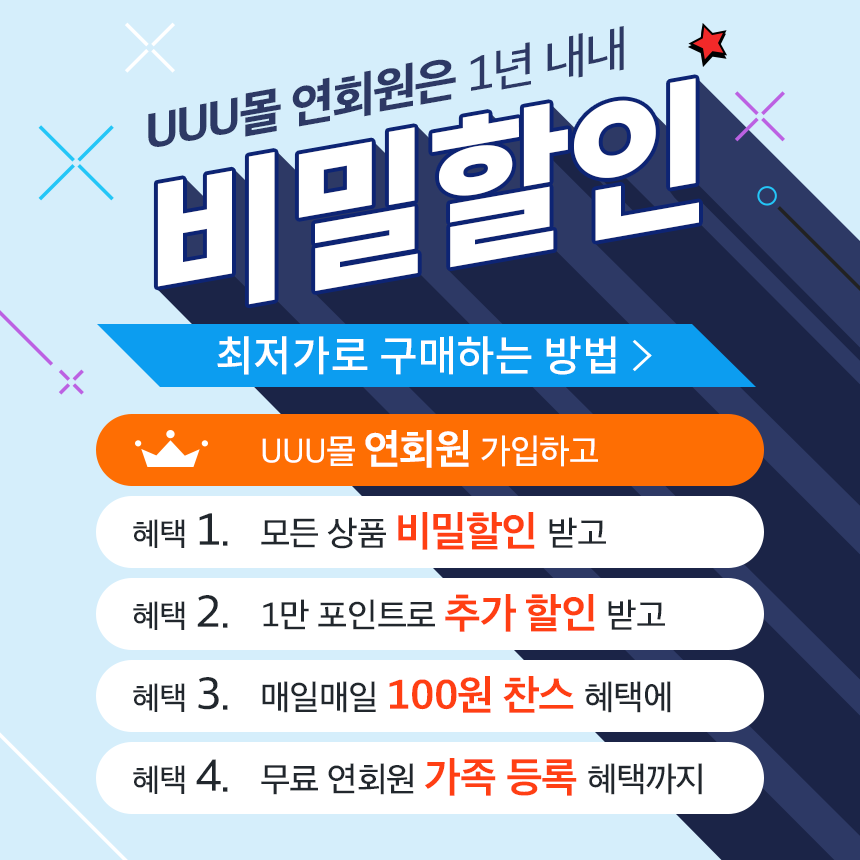
<style>
.page{position:relative;width:860px;height:860px;background:#d5eefb}
.page>*{position:absolute;margin:0}
.t1{font:47.1px "SDGothicNeoaUniTTF-hEb";letter-spacing:-0.05em;color:#2d3965}
.t2{font:47.1px "SDGothicNeoaUniTTF-eMd";letter-spacing:-0.05em;color:#2d3965}
.t3{font:156.6px "NotoSansCJKkr-Black";letter-spacing:-0.025em;color:#ffffff}
.t4{font:41.9px "NotoSansCJKkr-Medium";color:#ffffff}
.t5{font:33px "SDGothicNeoaUni-eMd";letter-spacing:-0.025em;color:#ffffff}
.t6{font:39.7px "SDGothicNeoaUni-gBd";letter-spacing:-0.025em;color:#ffffff}
.t7{font:30.5px "SDGothicNeoaUni-eMd";letter-spacing:-0.025em;color:#21272d}
.t8{font:43.6px "SDGothicNeoaUni-eMd";letter-spacing:-0.025em;color:#21272d}
.t9{font:33px "SDGothicNeoaUni-eMd";letter-spacing:-0.025em;color:#21272d}
.t10{font:39.7px "SDGothicNeoaUni-gBd";letter-spacing:-0.025em;color:#ff3f13}
</style>
<div class="page">
<p class="t1" style="left:148px;top:26px;width:476px;height:121px;rotate:-10deg">UUU몰 연회원은 <span class="t2">1년 내내</span></p>
<p class="t3" style="left:157px;top:78px;width:542px;height:227px;rotate:-10deg">비밀할인</p>
<p class="t4" style="left:217px;top:336px;width:399px;height:39px">최저가로 구매하는 방법</p>
<p class="t5" style="left:262px;top:430px;width:336px;height:38px">UUU몰 <span class="t6">연회원 </span>가입하고</p>
<p class="t7" style="left:133px;top:513px;width:95px;height:35px">혜택 <span class="t8">1.</span></p>
<p class="t9" style="left:261px;top:512px;width:345px;height:38px">모든 상품 <span class="t10">비밀할인 </span>받고</p>
<p class="t7" style="left:133px;top:595px;width:95px;height:35px">혜택 <span class="t8">2.</span></p>
<p class="t9" style="left:263px;top:594px;width:402px;height:38px">1만 포인트로 <span class="t10">추가 할인 </span>받고</p>
<p class="t7" style="left:133px;top:677px;width:95px;height:35px">혜택 <span class="t8">3.</span></p>
<p class="t10" style="left:262px;top:676px;width:409px;height:37px"><span class="t9">매일매일 </span>100원 찬스 <span class="t9">혜택에</span></p>
<p class="t7" style="left:133px;top:759px;width:95px;height:35px">혜택 <span class="t8">4.</span></p>
<p class="t9" style="left:261px;top:758px;width:441px;height:38px">무료 연회원 <span class="t10">가족 등록 </span>혜택까지</p>
</div>
